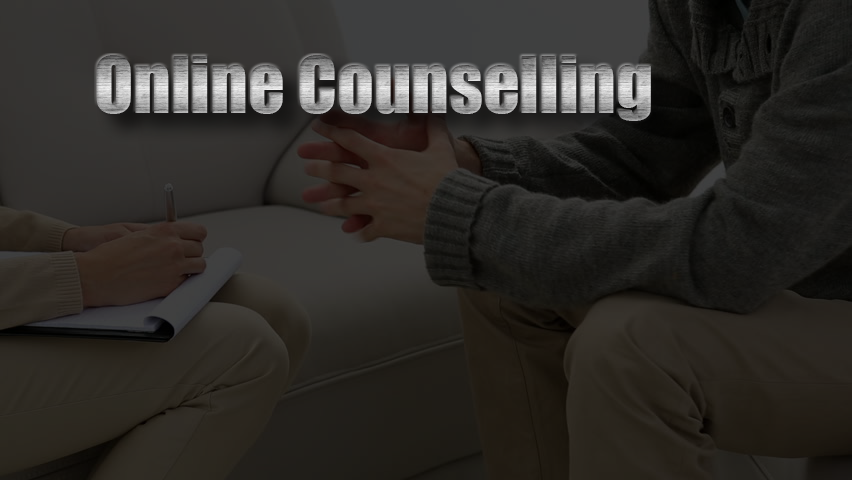
<style>
.page{position:relative;width:852px;height:480px}
.page>*{position:absolute;margin:0}
.t1{font:72px "Impact"}
</style>
<div class="page">
<p class="t1" style="left:96px;top:55px;width:555px;height:66px">Online Counselling</p>
</div>
